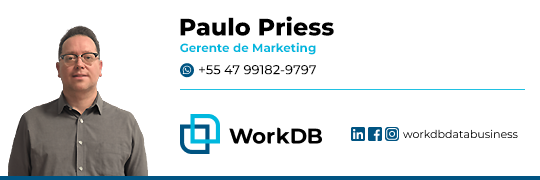
<style>
.page{position:relative;width:540px;height:180px;background:#ffffff}
.page>*{position:absolute;margin:0}
.t1{font:23.8px "MontserratRoman-ExtraBold";color:#000000}
.t2{font:11.9px "MontserratRoman-Bold";color:#00b8de}
.t3{font:13px "MontserratRoman-Medium";color:#000000}
</style>
<div class="page">
<p class="t1" style="left:180px;top:16px;width:154px;height:20px">Paulo Priess</p>
<p class="t2" style="left:180px;top:42px;width:136px;height:13px">Gerente de Marketing</p>
<p class="t3" style="left:199px;top:65px;width:117px;height:10px">+55 47 99182-9797</p>
</div>
